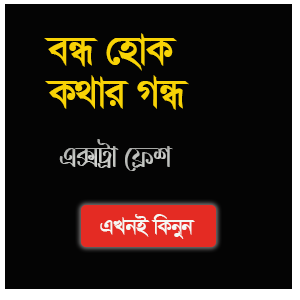
<style>
.page{position:relative;width:300px;height:300px;background:#040404}
.page>*{position:absolute;margin:0}
.t1{font:48px "SutonnyMJ-Bold";letter-spacing:-0.025em;color:#f8d305}
.t2{font:30px "LiRajdipSatyajitANSIV1";letter-spacing:-0.025em;color:#c0c2bf}
.t3{font:25.4px "SutonnyMJ-Bold";letter-spacing:-0.025em;color:#f5f7f3}
</style>
<div class="page">
<p class="t1" style="left:44px;top:33px;width:133px;height:38px">eÜ †nvK</p>
<p class="t1" style="left:45px;top:75px;width:144px;height:35px">K_vi MÜ</p>
<p class="t2" style="left:59px;top:139px;width:114px;height:32px">G·Uªv †d«k</p>
<p class="t3" style="left:100px;top:214px;width:95px;height:25px">GLbB wKbyb</p>
</div>
